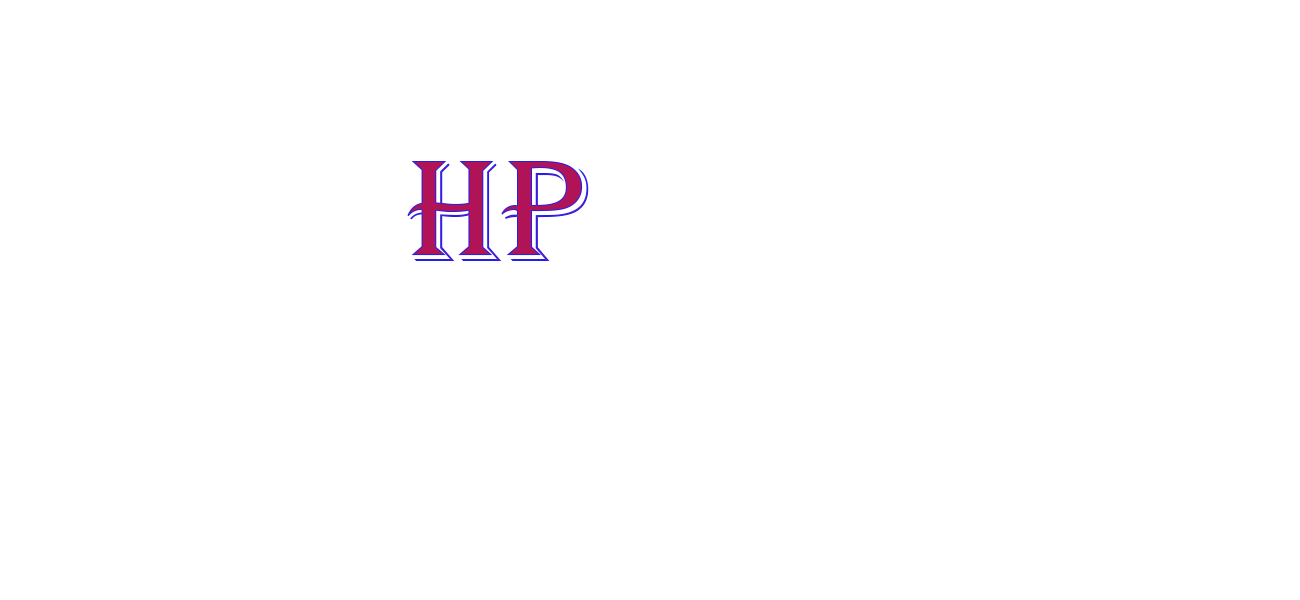
<style>
.page{position:relative;width:1300px;height:600px;background:#ffffff}
.page>*{position:absolute;margin:0}
.t1{font:150px "Algerian";color:#b01356}
</style>
<div class="page">
<p class="t1" style="left:407px;top:161px;width:182px;height:100px">HP</p>
</div>
